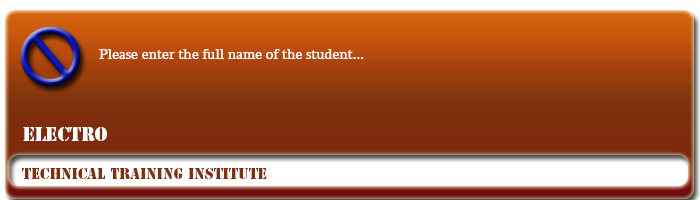
<style>
.page{position:relative;width:700px;height:200px}
.page>*{position:absolute;margin:0}
.t1{font:15px "Sylfaen";color:#ffffff}
.t2{font:18px "StencilStd";color:#ffffff}
.t3{font:14px "StencilStd";color:#7f300d}
</style>
<div class="page">
<p class="t1" style="left:99px;top:49px;width:265px;height:10px">Please enter the full name of the student...</p>
<p class="t2" style="left:23px;top:127px;width:84px;height:14px">ELECTRO</p>
<p class="t3" style="left:22px;top:168px;width:245px;height:11px">Technical Training Institute</p>
</div>
